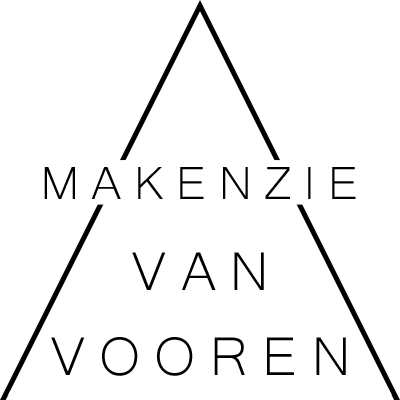
<style>
.page{position:relative;width:400px;height:400px;background:#ffffff}
.page>*{position:absolute;margin:0}
.t1{font:60px "Microsoft-Yi-Baiti";letter-spacing:0.2em;color:#000000}
.t2{font:70px "Microsoft-Yi-Baiti";letter-spacing:0.2em;color:#000000}
</style>
<div class="page">
<p class="t1" style="left:44px;top:167px;width:312px;height:32px">MAKENZIE</p>
<p class="t2" style="left:51px;top:252px;width:295px;height:124px;text-align:center">VAN <br>VOOREN</p>
</div>
